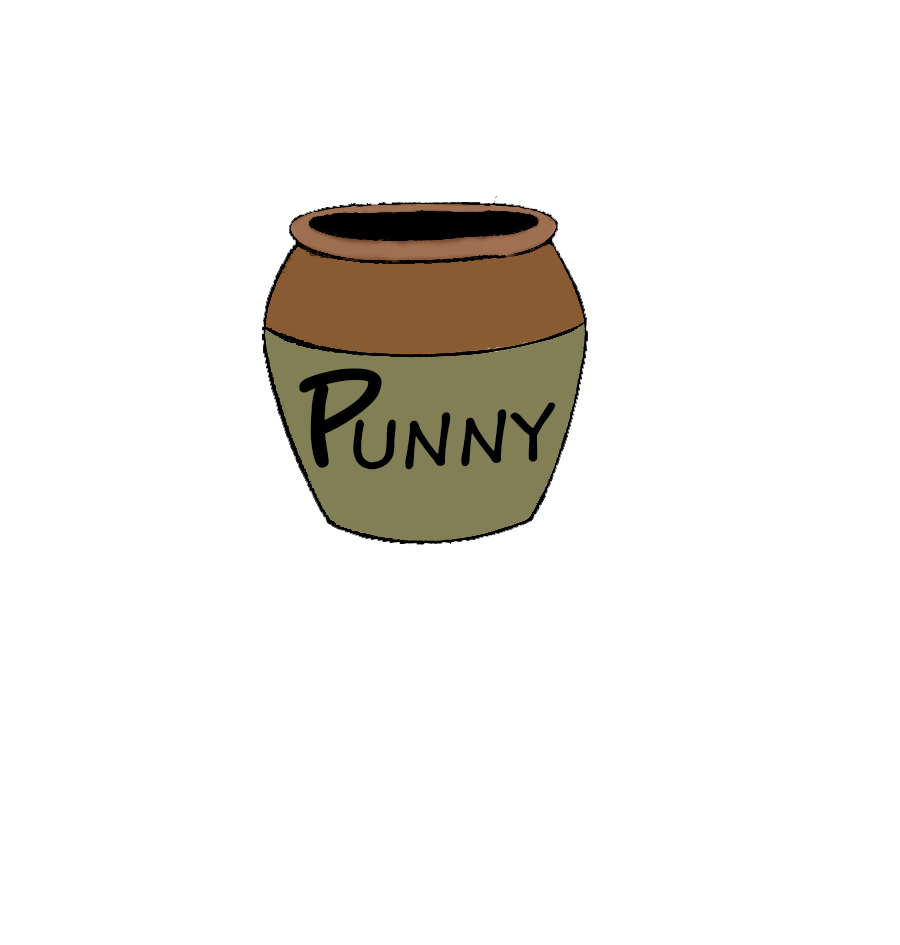
<style>
.page{position:relative;width:900px;height:945px;background:#ffffff}
.page>*{position:absolute;margin:0}
.t1{font:122.2px "SegoeScript-Bold";color:#000000}
.t2{font:66.7px "SegoeScript-Bold";color:#000000}
</style>
<div class="page">
<p class="t1" style="left:299px;top:368px;width:83px;height:100px;rotate:-5deg">P</p>
<p class="t2" style="left:353px;top:402px;width:203px;height:68px;rotate:-3deg">UNNY</p>
</div>
